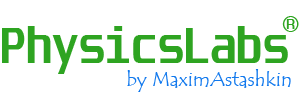
<style>
.page{position:relative;width:300px;height:100px;background:#ffffff}
.page>*{position:absolute;margin:0}
.t1{font:30px "Unispace-Bold";color:#2ea421}
.t2{font:43px "Unispace-Bold";color:#2ea421}
.t3{font:20px "TempusSansITC";color:#1279ed}
</style>
<div class="page">
<p class="t1" style="left:282px;top:16px;width:17px;height:16px">®</p>
<p class="t2" style="left:2px;top:26px;width:286px;height:48px">PhysicsLabs</p>
<p class="t3" style="left:127px;top:69px;width:164px;height:23px">by MaximAstashkin</p>
</div>
